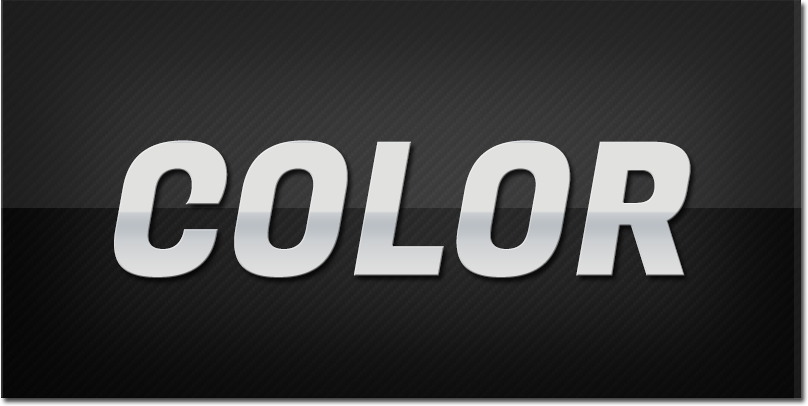
<style>
.page{position:relative;width:808px;height:406px}
.page>*{position:absolute;margin:0}
.t1{font:185.2px "FugazOne-Regular";color:#dfdfdf}
</style>
<div class="page">
<p class="t1" style="left:114px;top:140px;width:577px;height:138px">COLOR</p>
</div>
